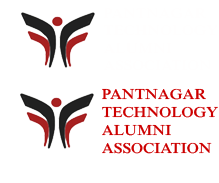
<style>
.page{position:relative;width:219px;height:183px;background:#ffffff}
.page>*{position:absolute;margin:0}
.t1{font:15px "IskoolaPota-Bold";color:#cc0000}
</style>
<div class="page">
<p class="t1" style="left:102px;top:88px;width:116px;height:66px">PANTNAGAR<br>TECHNOLOGY<br>ALUMNI<br>ASSOCIATION</p>
</div>
